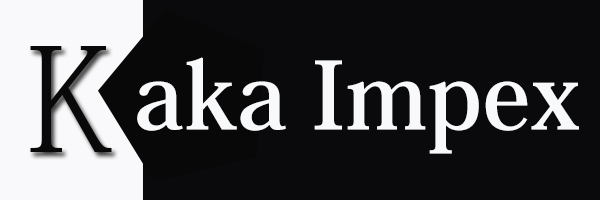
<style>
.page{position:relative;width:600px;height:200px;background:#0a0a0c}
.page>*{position:absolute;margin:0}
.t1{font:143.3px "KozMinPr6N-ExtraLight";color:#090909}
.t2{font:92.6px "KozMinPr6N-Bold";color:#f8f9fb}
</style>
<div class="page">
<p class="t1" style="left:30px;top:46px;width:82px;height:106px">K</p>
<p class="t2" style="left:137px;top:57px;width:442px;height:97px">aka Impex</p>
</div>
